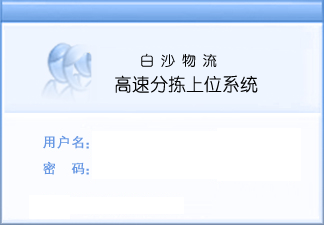
<style>
.page{position:relative;width:324px;height:225px;background:#eef5ff}
.page>*{position:absolute;margin:0}
.t1{font:14px "YouYuan";color:#030303}
.t2{font:18px "YouYuan";color:#030303}
</style>
<div class="page">
<p class="t1" style="left:141px;top:53px;width:76px;height:14px">白 沙 物 流</p>
<p class="t2" style="left:115px;top:75px;width:143px;height:18px">高速分拣上位系统</p>
</div>
